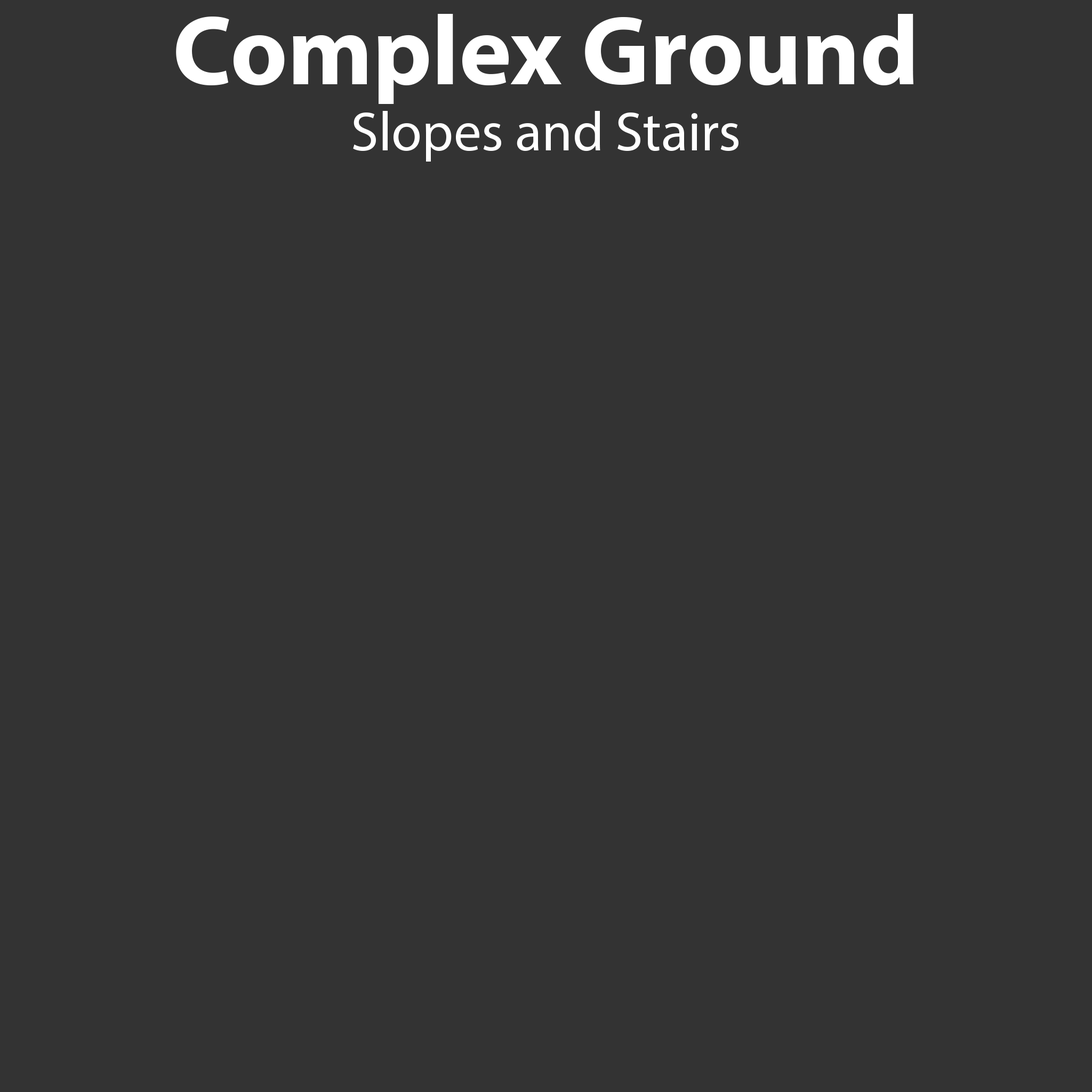
<style>
.page{position:relative;width:1092px;height:1092px;background:#333333}
.page>*{position:absolute;margin:0}
.t1{font:55.5px "MyriadPro-Regular";color:#ffffff}
.t2{font:99.2px "MyriadPro-Bold";color:#ffffff}
</style>
<div class="page">
<p class="t1" style="left:176px;top:14px;width:737px;height:148px;text-align:center"><span class="t2">Complex Ground<br></span>Slopes and Stairs</p>
</div>
